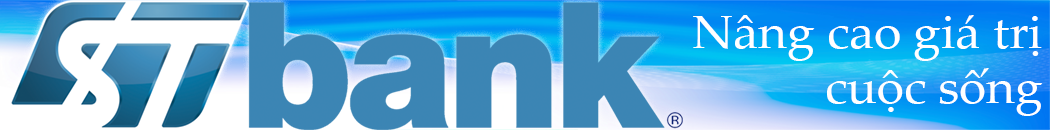
<style>
.page{position:relative;width:1050px;height:130px}
.page>*{position:absolute;margin:0}
.t1{font:46px "PalatinoLinotype-Roman";color:#ffffff;scale:1.08 1}
</style>
<div class="page">
<p class="t1" style="left:693px;top:15px;width:350px;height:101px;text-align:right">Nâng cao giá trị<br>cuộc sống</p>
</div>
